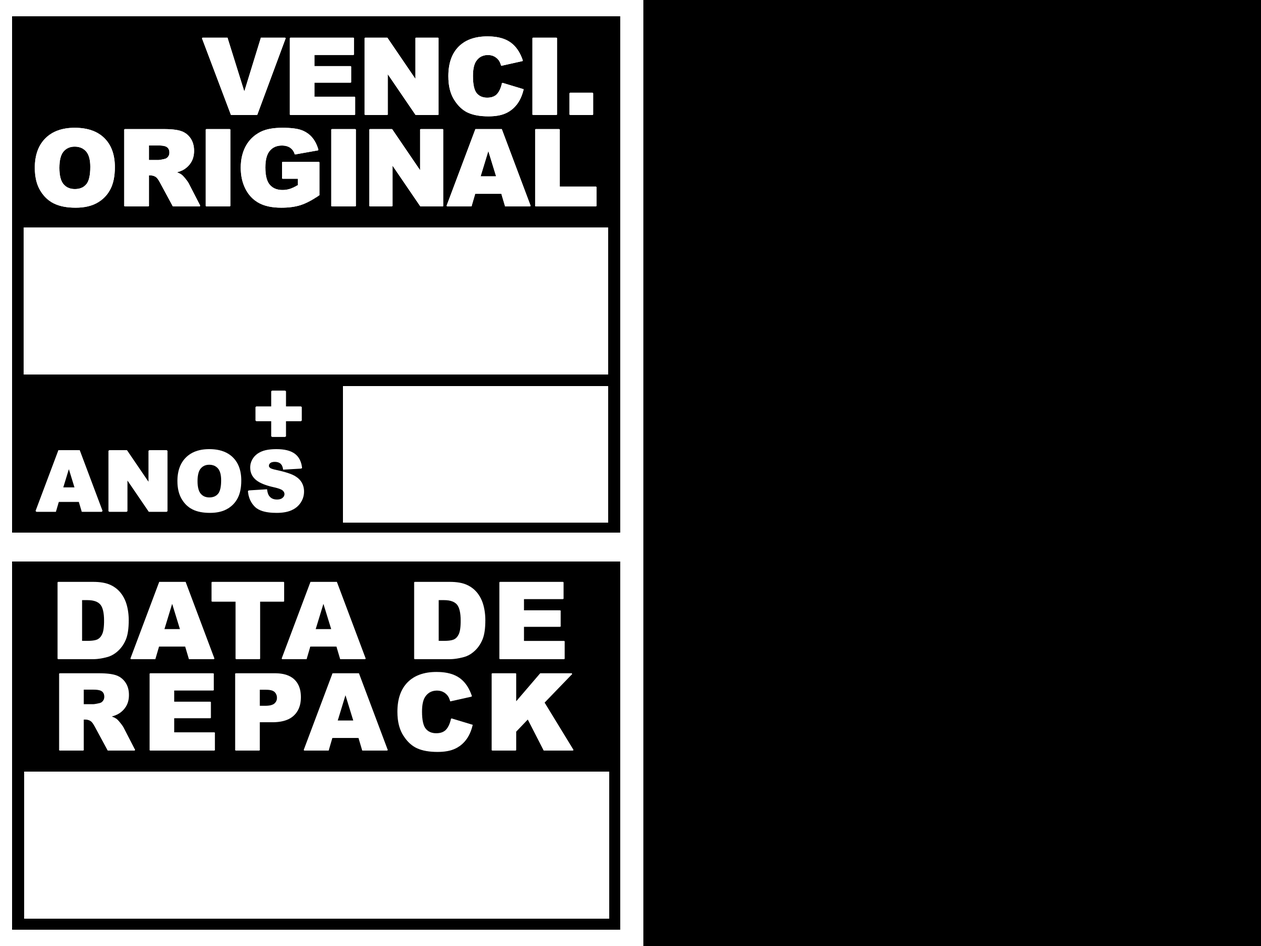
<style>
.page{position:relative;width:1261px;height:946px;background:#000000}
.page>*{position:absolute;margin:0}
.t1{font:106.6px/91.4px "Arial-Black";letter-spacing:-0.05em;color:#ffffff;font-weight:bold}
.t2{font:84.1px/67.2px "Arial-Black";letter-spacing:-0.01em;color:#ffffff;font-weight:bold}
.t3{font:106.6px/91.4px "Arial-Black";color:#ffffff;font-weight:bold}
.t4{font:106.6px/91.4px "Arial-Black";letter-spacing:0.05em;color:#ffffff;font-weight:bold}
</style>
<div class="page">
<p class="t1" style="left:35px;top:36px;width:562px;height:172px;text-align:right">VENCI.<br>ORIGINAL</p>
<p class="t1" style="left:35px;top:36px;width:562px;height:172px;text-align:right">VENCI.<br>ORIGINAL</p>
<p class="t2" style="left:35px;top:390px;width:269px;height:123px;text-align:right">+<br>ANOS</p>
<p class="t3" style="left:57px;top:581px;width:516px;height:171px;text-align:center">DATA DE<br><span class="t4">REPACK</span></p>
</div>
